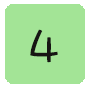
<style>
.page{position:relative;width:90px;height:90px;background:#a3e496}
.page>*{position:absolute;margin:0}
.t1{font:48px "DFWaWaSC-W5";color:#171514}
</style>
<div class="page">
<p class="t1" style="left:30px;top:29px;width:28px;height:34px">4</p>
</div>
